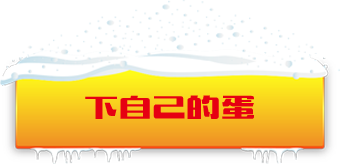
<style>
.page{position:relative;width:340px;height:164px;background:#ffffff}
.page>*{position:absolute;margin:0}
.t1{font:34.2px "MFWenYan_Noncommercial-Regular";color:#e60012}
</style>
<div class="page">
<p class="t1" style="left:85px;top:95px;width:169px;height:24px">下自己的蛋</p>
</div>
